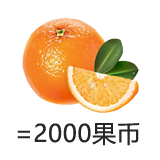
<style>
.page{position:relative;width:160px;height:160px;background:#ffffff}
.page>*{position:absolute;margin:0}
.t1{font:24px "MicrosoftYaHei";letter-spacing:0.025em;color:#272727;font-variant:small-caps}
</style>
<div class="page">
<p class="t1" style="left:17px;top:123px;width:123px;height:23px">=2000果币</p>
</div>
